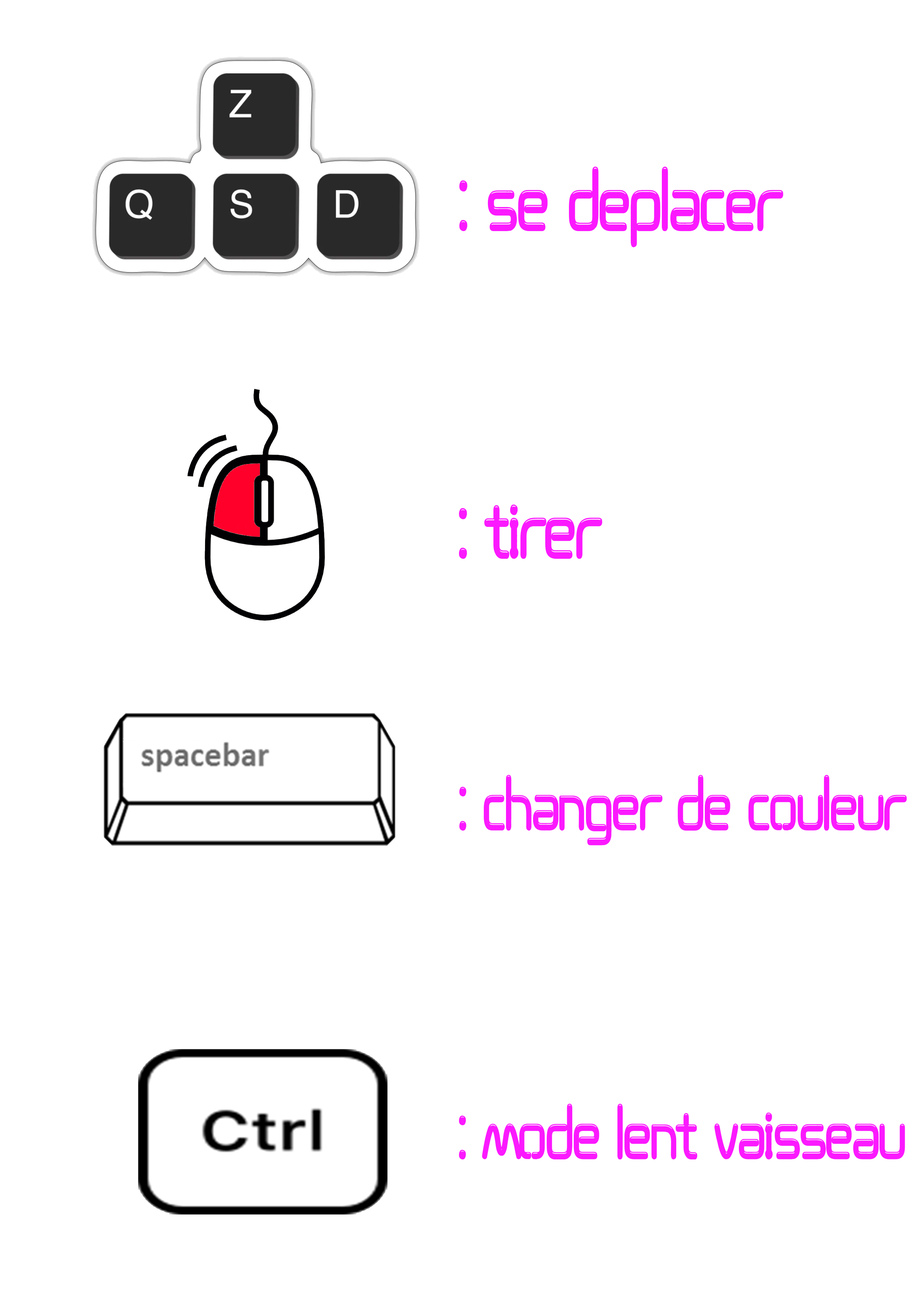
<style>
.page{position:relative;width:918px;height:1299px;background:#ffffff}
.page>*{position:absolute;margin:0}
.t1{font:108.7px "neon";color:#fb19ff;scale:0.72 1}
.t2{font:93.9px "neon";color:#fb19ff;scale:0.72 1}
</style>
<div class="page">
<p class="t1" style="left:459px;top:167px;width:324px;height:80px">: Se Deplacer</p>
<p class="t1" style="left:459px;top:504px;width:143px;height:55px">: Tirer</p>
<p class="t2" style="left:459px;top:775px;width:448px;height:70px">: Changer de couleur</p>
<p class="t2" style="left:459px;top:1103px;width:446px;height:56px">: mode lent vaisseau</p>
</div>
